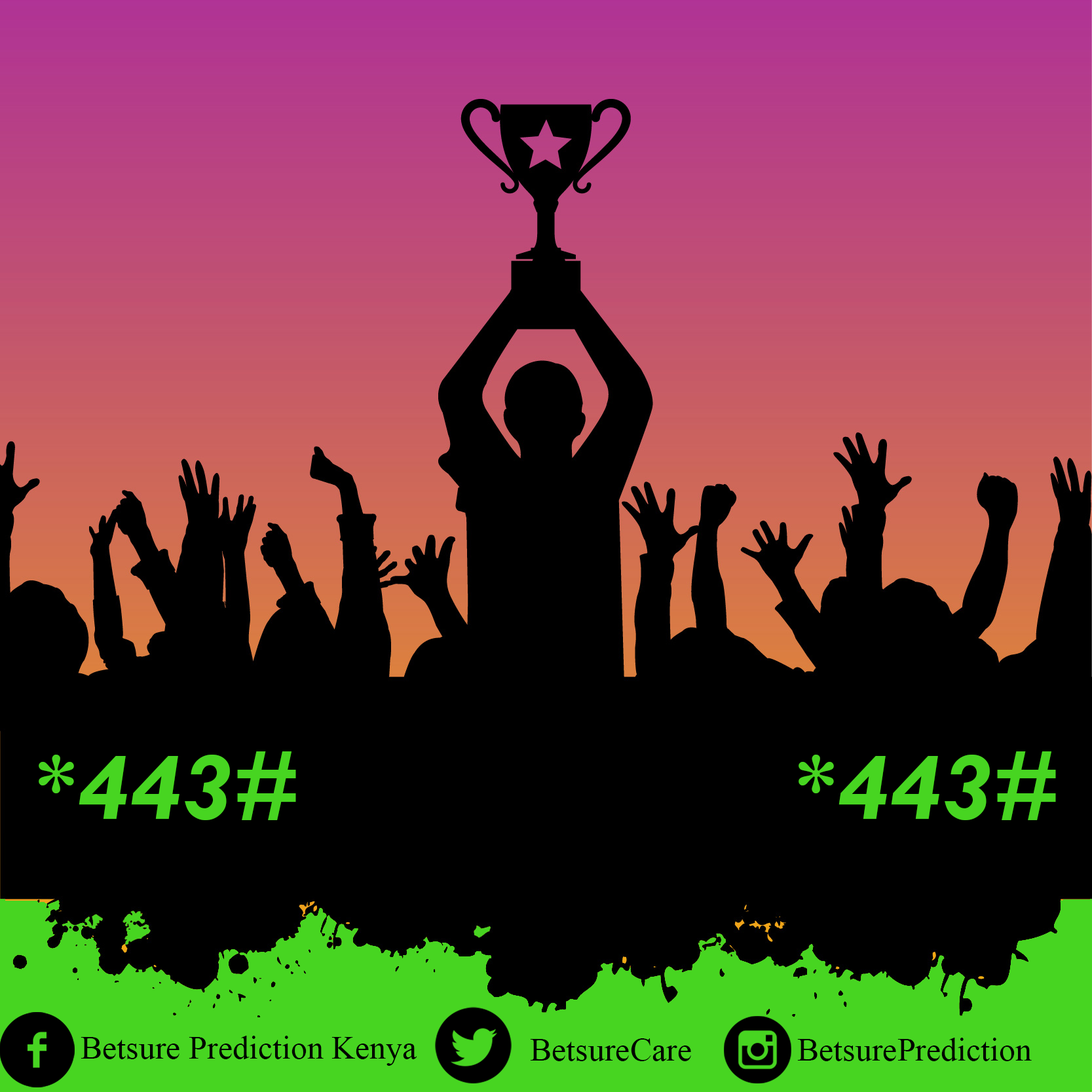
<style>
.page{position:relative;width:1092px;height:1092px;background:#000000}
.page>*{position:absolute;margin:0}
.t1{font:98.3px "TwCenMT-BoldItalic";color:#47d521}
.t2{font:32.8px "TimesNewRomanPSMT";color:#010101}
</style>
<div class="page">
<p class="t1" style="left:39px;top:751px;width:257px;height:69px">*443#</p>
<p class="t1" style="left:799px;top:751px;width:257px;height:69px">*443#</p>
<p class="t2" style="left:81px;top:1036px;width:336px;height:30px">Betsure Prediction Kenya</p>
<p class="t2" style="left:797px;top:1038px;width:235px;height:23px">BetsurePrediction</p>
<p class="t2" style="left:530px;top:1038px;width:161px;height:23px">BetsureCare</p>
</div>
